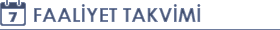
<style>
.page{position:relative;width:280px;height:30px;background:#ffffff}
.page>*{position:absolute;margin:0}
.t1{font:20px "CenturyGothic-Bold";color:#5b6989}
</style>
<div class="page">
<p class="t1" style="left:34px;top:4px;width:167px;height:18px">FAALİYET TAKVİMİ</p>
</div>
